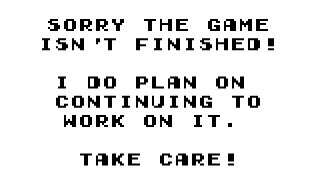
<style>
.page{position:relative;width:320px;height:180px;background:#ffffff}
.page>*{position:absolute;margin:0}
.t1{font:16px "GamegirlClassic";color:#000000}
</style>
<div class="page">
<p class="t1" style="left:42px;top:19px;width:232px;height:147px;text-align:center">Sorry the game<br>isn't finished!<br><br>I do plan on <br>continuing to<br>work on it. <br><br>take care!</p>
</div>
